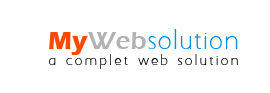
<style>
.page{position:relative;width:270px;height:93px;background:#ffffff}
.page>*{position:absolute;margin:0}
.t1{font:22px "AaarghNormal";letter-spacing:0.05em;color:#008fea}
.t2{font:26px "ErasITC-Demi";letter-spacing:0.01em;color:#b2b2b2}
.t3{font:26px "ErasITC-Bold";letter-spacing:0.01em;color:#ff4800}
.t4{font:12px "AaarghNormal";letter-spacing:0.185em;color:#000000}
</style>
<div class="page">
<p class="t1" style="left:148px;top:29px;width:90px;height:20px">solution</p>
<p class="t2" style="left:49px;top:32px;width:97px;height:23px"><span class="t3">My</span>Web</p>
<p class="t4" style="left:49px;top:54px;width:189px;height:15px">a complet web solution</p>
</div>
